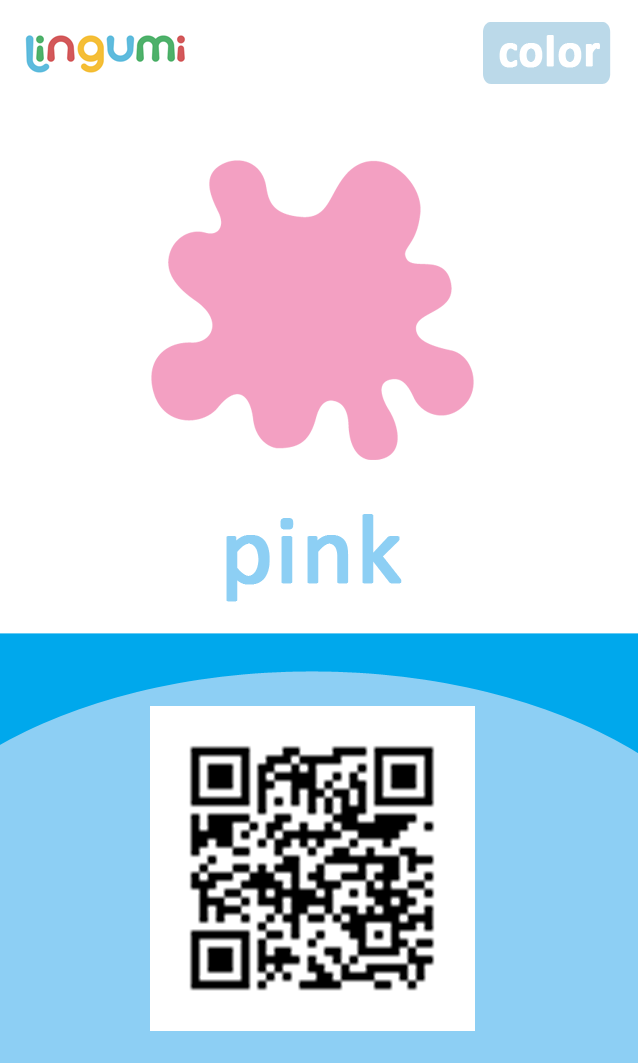
<style>
.page{position:relative;width:638px;height:1063px;background:#ffffff}
.page>*{position:absolute;margin:0}
.t1{font:45.8px "Calibri-Bold";color:#ffffff;font-weight:bold}
.t2{font:100px "Calibri";color:#8dcff4;font-weight:bold}
</style>
<div class="page">
<p class="t1" style="left:499px;top:35px;width:101px;height:33px">color</p>
<p class="t2" style="left:226px;top:514px;width:176px;height:88px">pink</p>
</div>
